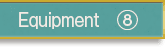
<style>
.page{position:relative;width:165px;height:47px;background:#579f9c}
.page>*{position:absolute;margin:0}
.t1{font:18px "GothicMB101Pro-Regular";letter-spacing:-0.04em;color:#f2ebe5;scale:0.9 1}
</style>
<div class="page">
<p class="t1" style="left:19px;top:12px;width:80px;height:17px">Equipment</p>
</div>
